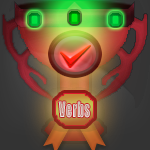
<style>
.page{position:relative;width:150px;height:150px}
.page>*{position:absolute;margin:0}
.t1{font:19.4px "Impact";scale:0.68 1}
</style>
<div class="page">
<p class="t1" style="left:58px;top:101px;width:32px;height:17px">Verbs</p>
</div>
